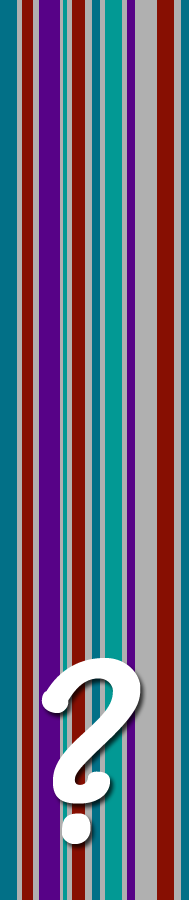
<style>
.page{position:relative;width:189px;height:900px;background:#b0b0b0}
.page>*{position:absolute;margin:0}
.t1{font:271.6px "TektonPro-BoldCond";color:#ffffff;scale:1.13 1}
</style>
<div class="page">
<p class="t1" style="left:41px;top:658px;width:100px;height:186px">?</p>
</div>
